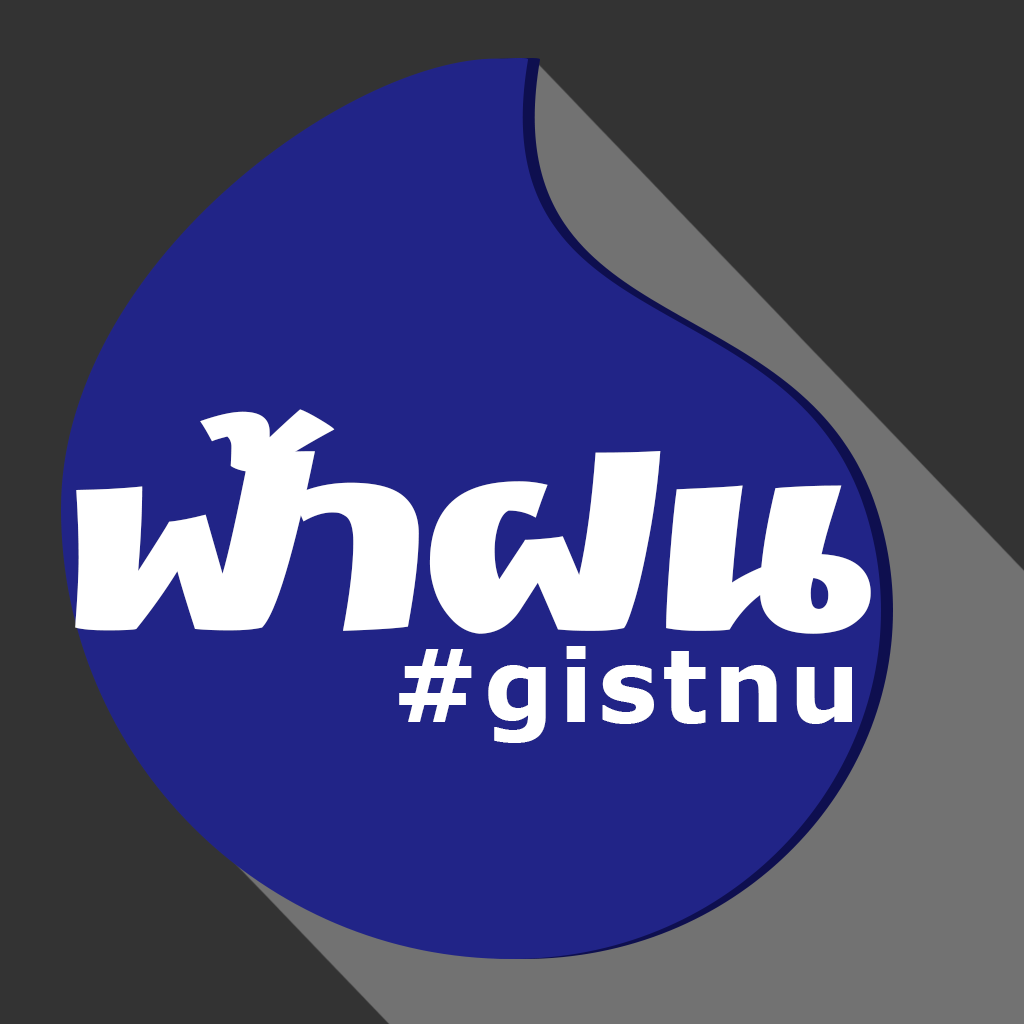
<style>
.page{position:relative;width:1024px;height:1024px;background:#212487}
.page>*{position:absolute;margin:0}
.t1{font:282px "F0nt-1000";letter-spacing:0.05em;color:#ffffff}
.t2{font:100px "Verdana-Bold";letter-spacing:0.05em;color:#ffffff}
</style>
<div class="page">
<p class="t1" style="left:75px;top:409px;width:796px;height:225px">ฟ้าฝน</p>
<p class="t2" style="left:399px;top:646px;width:453px;height:97px">#gistnu</p>
</div>
